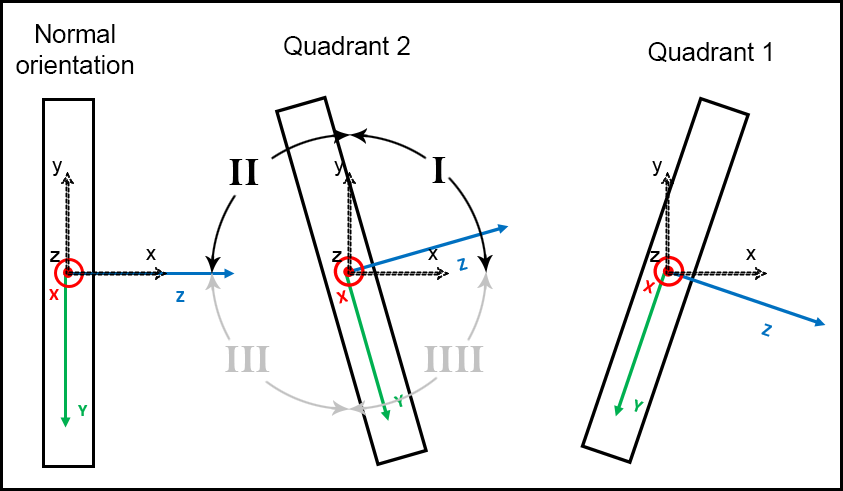
<style>
.page{position:relative;width:843px;height:491px;background:#ffffff}
.page>*{position:absolute;margin:0}
.t1{font:25.5px "ArialMT";color:#000000}
.t2{font:39.7px "BellMTBold";color:#000000}
.t3{font:39.7px "BellMTBold";color:#c2c2c2}
</style>
<div class="page">
<p class="t1" style="left:16px;top:24px;width:118px;height:50px;text-align:center">Normal <br>orientation</p>
<p class="t1" style="left:284px;top:36px;width:126px;height:20px">Quadrant 2</p>
<p class="t1" style="left:648px;top:42px;width:123px;height:20px">Quadrant 1</p>
<p class="t2" style="left:229px;top:159px;width:30px;height:26px">II</p>
<p class="t2" style="left:432px;top:157px;width:14px;height:26px">I</p>
<p class="t3" style="left:225px;top:346px;width:45px;height:26px">III</p>
<p class="t3" style="left:424px;top:346px;width:60px;height:26px">IIII</p>
</div>
